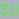
<style>
.page{position:relative;width:19px;height:19px;background:#abb4be}
.page>*{position:absolute;margin:0}
.t1{font:16px "SynchroLET";letter-spacing:0.025em;color:#66e14e}
</style>
<div class="page">
<p class="t1" style="left:0px;top:4px;width:19px;height:11px">sw</p>
</div>
